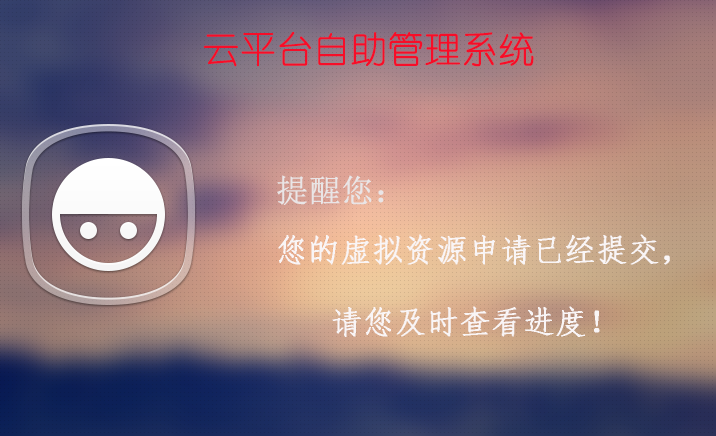
<style>
.page{position:relative;width:716px;height:436px}
.page>*{position:absolute;margin:0}
.t1{font:36px "YouYuan";color:#f70d28;font-weight:bold}
.t2{font:32px "SimSun";color:#e9e5e6;font-weight:bold}
.t3{font:32px "·ÂËÎ";color:#f9f5f6;font-weight:bold}
</style>
<div class="page">
<p class="t1" style="left:203px;top:32px;width:331px;height:35px">云平台自助管理系统</p>
<p class="t2" style="left:277px;top:175px;width:107px;height:30px">提醒您：</p>
<p class="t3" style="left:278px;top:234px;width:392px;height:31px">您的虚拟资源申请已经提交，</p>
<p class="t3" style="left:332px;top:306px;width:268px;height:31px">请您及时查看进度！</p>
</div>
